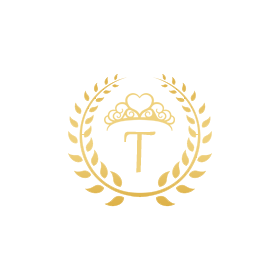
<style>
.page{position:relative;width:280px;height:280px;background:#ffffff}
.page>*{position:absolute;margin:0}
.t1{font:72px "Gabriola";color:#efd17e}
</style>
<div class="page">
<p class="t1" style="left:124px;top:131px;width:32px;height:42px">T</p>
</div>
